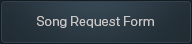
<style>
.page{position:relative;width:192px;height:44px}
.page>*{position:absolute;margin:0}
.t1{font:13px "Colfax-Regular";color:#c9c6c6}
</style>
<div class="page">
<p class="t1" style="left:37px;top:16px;width:117px;height:12px">Song Request Form</p>
</div>
